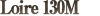
<style>
.page{position:relative;width:100px;height:16px;background:#ffffff}
.page>*{position:absolute;margin:0}
.t1{font:18px "RyuminPro-ExBold";letter-spacing:-0.08em;color:#4a3f32;font-weight:bold;scale:0.9 1}
</style>
<div class="page">
<p class="t1" style="left:0px;top:0px;width:80px;height:15px">Loire 130M</p>
</div>
